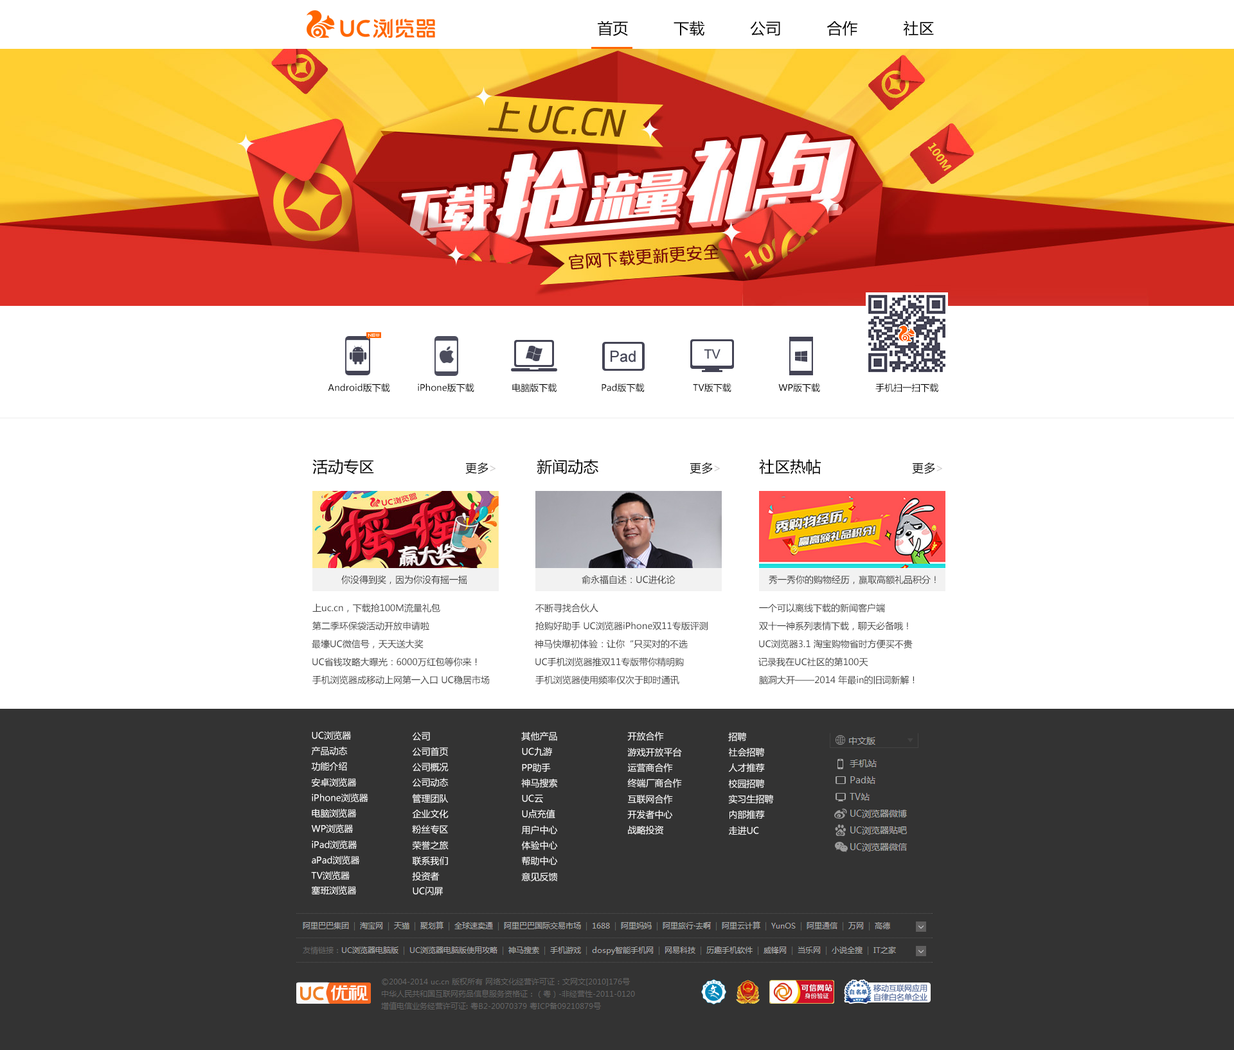
<style>
.page{position:relative;width:1234px;height:1050px;background:#ffffff}
.page>*{position:absolute;margin:0}
.t1{font:15.4px "MicrosoftYaHei";color:#000000}
.t2{font:9px "MicrosoftYaHei";color:#000000}
.t3{font:11.6px "MicrosoftYaHei";color:#000000}
.t4{font:11.6px "MicrosoftYaHei";color:#d0cece}
.t5{font:9px "MicrosoftYaHei";color:#404040}
.t6{font:9px "MicrosoftYaHei";color:#ffffff}
</style>
<div class="page">
<p class="t1" style="left:598px;top:21px;width:336px;height:15px">首页          下载          公司          合作          社区</p>
<p class="t2" style="left:328px;top:383px;width:62px;height:10px">Android版下载</p>
<p class="t2" style="left:418px;top:383px;width:56px;height:10px">iPhone版下载</p>
<p class="t2" style="left:512px;top:383px;width:45px;height:10px">电脑版下载</p>
<p class="t2" style="left:602px;top:383px;width:43px;height:10px">Pad版下载</p>
<p class="t2" style="left:693px;top:383px;width:39px;height:10px">TV版下载</p>
<p class="t2" style="left:779px;top:383px;width:41px;height:10px">WP版下载</p>
<p class="t2" style="left:876px;top:383px;width:63px;height:10px">手机扫一扫下载</p>
<p class="t1" style="left:312px;top:459px;width:184px;height:16px">活动专区                    <span class="t3">更多</span><span class="t4">&gt;</span></p>
<p class="t1" style="left:537px;top:459px;width:183px;height:16px">新闻动态                    <span class="t3">更多</span><span class="t4">&gt;</span></p>
<p class="t1" style="left:759px;top:459px;width:183px;height:15px">社区热帖                    <span class="t3">更多</span><span class="t4">&gt;</span></p>
<p class="t5" style="left:341px;top:575px;width:126px;height:9px">你没得到奖，因为你没有摇一摇</p>
<p class="t5" style="left:582px;top:575px;width:94px;height:9px">俞永福自述：UC进化论</p>
<p class="t5" style="left:769px;top:575px;width:167px;height:9px">秀一秀你的购物经历，赢取高额礼品积分！</p>
<p class="t5" style="left:312px;top:604px;width:128px;height:9px">上uc.cn，下载抢100M流量礼包</p>
<p class="t5" style="left:536px;top:604px;width:62px;height:9px">不断寻找合伙人</p>
<p class="t5" style="left:759px;top:604px;width:126px;height:9px">一个可以离线下载的新闻客户端</p>
<p class="t5" style="left:312px;top:622px;width:117px;height:9px">第二季环保袋活动开放申请啦</p>
<p class="t5" style="left:536px;top:622px;width:172px;height:9px">抢购好助手 UC浏览器iPhone双11专版评测</p>
<p class="t5" style="left:759px;top:622px;width:149px;height:9px">双十一神系列表情下载，聊天必备哦！</p>
<p class="t5" style="left:312px;top:640px;width:112px;height:9px">最壕UC微信号，天天送大奖</p>
<p class="t5" style="left:535px;top:640px;width:153px;height:9px">神马快爆初体验：让你“只买对的不选</p>
<p class="t5" style="left:759px;top:640px;width:154px;height:9px">UC浏览器3.1 淘宝购物省时方便买不贵</p>
<p class="t5" style="left:312px;top:658px;width:165px;height:9px">UC省钱攻略大曝光：6000万红包等你来！</p>
<p class="t5" style="left:536px;top:658px;width:148px;height:9px">UC手机浏览器推双11专版带你精明购</p>
<p class="t5" style="left:759px;top:658px;width:110px;height:9px">记录我在UC社区的第100天</p>
<p class="t5" style="left:312px;top:676px;width:178px;height:9px">手机浏览器成移动上网第一入口 UC稳居市场</p>
<p class="t5" style="left:536px;top:676px;width:144px;height:9px">手机浏览器使用频率仅次于即时通讯</p>
<p class="t5" style="left:759px;top:676px;width:156px;height:9px">脑洞大开——2014 年最in的旧词新解！</p>
<p class="t6" style="left:312px;top:731px;width:39px;height:10px">UC浏览器</p>
<p class="t6" style="left:412px;top:732px;width:18px;height:9px">公司</p>
<p class="t6" style="left:521px;top:732px;width:36px;height:9px">其他产品</p>
<p class="t6" style="left:627px;top:732px;width:37px;height:9px">开放合作</p>
<p class="t6" style="left:728px;top:732px;width:19px;height:10px">招聘</p>
<p class="t6" style="left:311px;top:746px;width:37px;height:10px">产品动态</p>
<p class="t6" style="left:412px;top:747px;width:36px;height:10px">公司首页</p>
<p class="t6" style="left:522px;top:748px;width:30px;height:9px">UC九游</p>
<p class="t6" style="left:627px;top:748px;width:55px;height:9px">游戏开放平台</p>
<p class="t6" style="left:728px;top:748px;width:37px;height:9px">社会招聘</p>
<p class="t6" style="left:311px;top:762px;width:36px;height:9px">功能介绍</p>
<p class="t6" style="left:412px;top:763px;width:37px;height:9px">公司概况</p>
<p class="t6" style="left:522px;top:764px;width:29px;height:9px">PP助手</p>
<p class="t6" style="left:627px;top:763px;width:46px;height:10px">运营商合作</p>
<p class="t6" style="left:728px;top:763px;width:37px;height:10px">人才推荐</p>
<p class="t6" style="left:311px;top:778px;width:46px;height:10px">安卓浏览器</p>
<p class="t6" style="left:412px;top:778px;width:37px;height:10px">公司动态</p>
<p class="t6" style="left:521px;top:779px;width:37px;height:9px">神马搜索</p>
<p class="t6" style="left:627px;top:779px;width:55px;height:9px">终端厂商合作</p>
<p class="t6" style="left:728px;top:779px;width:37px;height:10px">校园招聘</p>
<p class="t6" style="left:312px;top:793px;width:56px;height:10px">iPhone浏览器</p>
<p class="t6" style="left:412px;top:794px;width:37px;height:10px">管理团队</p>
<p class="t6" style="left:522px;top:795px;width:21px;height:9px">UC云</p>
<p class="t6" style="left:628px;top:795px;width:45px;height:9px">互联网合作</p>
<p class="t6" style="left:728px;top:795px;width:46px;height:9px">实习生招聘</p>
<p class="t6" style="left:312px;top:809px;width:45px;height:9px">电脑浏览器</p>
<p class="t6" style="left:412px;top:809px;width:37px;height:10px">企业文化</p>
<p class="t6" style="left:522px;top:809px;width:33px;height:10px">U点充值</p>
<p class="t6" style="left:627px;top:810px;width:46px;height:10px">开发者中心</p>
<p class="t6" style="left:730px;top:810px;width:35px;height:10px">内部推荐</p>
<p class="t6" style="left:311px;top:824px;width:42px;height:10px">WP浏览器</p>
<p class="t6" style="left:412px;top:825px;width:36px;height:9px">粉丝专区</p>
<p class="t6" style="left:521px;top:825px;width:37px;height:10px">用户中心</p>
<p class="t6" style="left:628px;top:825px;width:36px;height:10px">战略投资</p>
<p class="t6" style="left:729px;top:826px;width:30px;height:10px">走进UC</p>
<p class="t6" style="left:312px;top:840px;width:45px;height:10px">iPad浏览器</p>
<p class="t6" style="left:412px;top:841px;width:37px;height:10px">荣誉之旅</p>
<p class="t6" style="left:521px;top:841px;width:37px;height:10px">体验中心</p>
<p class="t6" style="left:312px;top:856px;width:48px;height:9px">aPad浏览器</p>
<p class="t6" style="left:412px;top:856px;width:36px;height:10px">联系我们</p>
<p class="t6" style="left:522px;top:856px;width:36px;height:10px">帮助中心</p>
<p class="t6" style="left:311px;top:871px;width:39px;height:10px">TV浏览器</p>
<p class="t6" style="left:412px;top:872px;width:28px;height:9px">投资者</p>
<p class="t6" style="left:521px;top:872px;width:37px;height:10px">意见反馈</p>
<p class="t6" style="left:311px;top:886px;width:46px;height:10px">塞班浏览器</p>
<p class="t6" style="left:413px;top:887px;width:30px;height:9px">UC闪屏</p>
</div>
